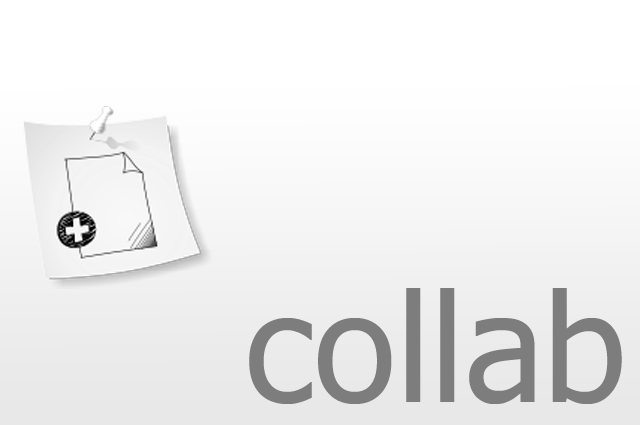
<style>
.page{position:relative;width:640px;height:425px;background:#ffffff}
.page>*{position:absolute;margin:0}
.t1{font:150px "Tahoma";color:#7d7d7d}
</style>
<div class="page">
<p class="t1" style="left:249px;top:288px;width:373px;height:116px">collab</p>
</div>
